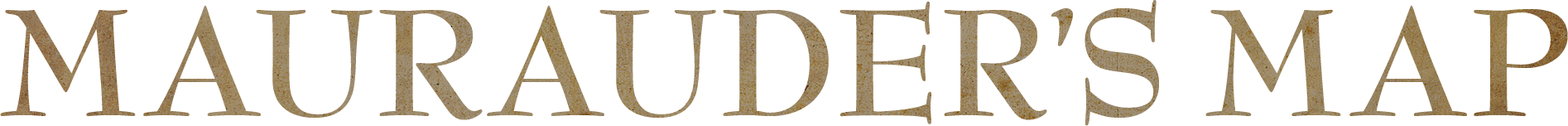
<style>
.page{position:relative;width:1568px;height:126px;background:#ffffff}
.page>*{position:absolute;margin:0}
.t1{font:165.6px "BernhardModernStd-Bold"}
</style>
<div class="page">
<p class="t1" style="left:0px;top:0px;width:1568px;height:126px">MAURAUDER’S MAP</p>
</div>
